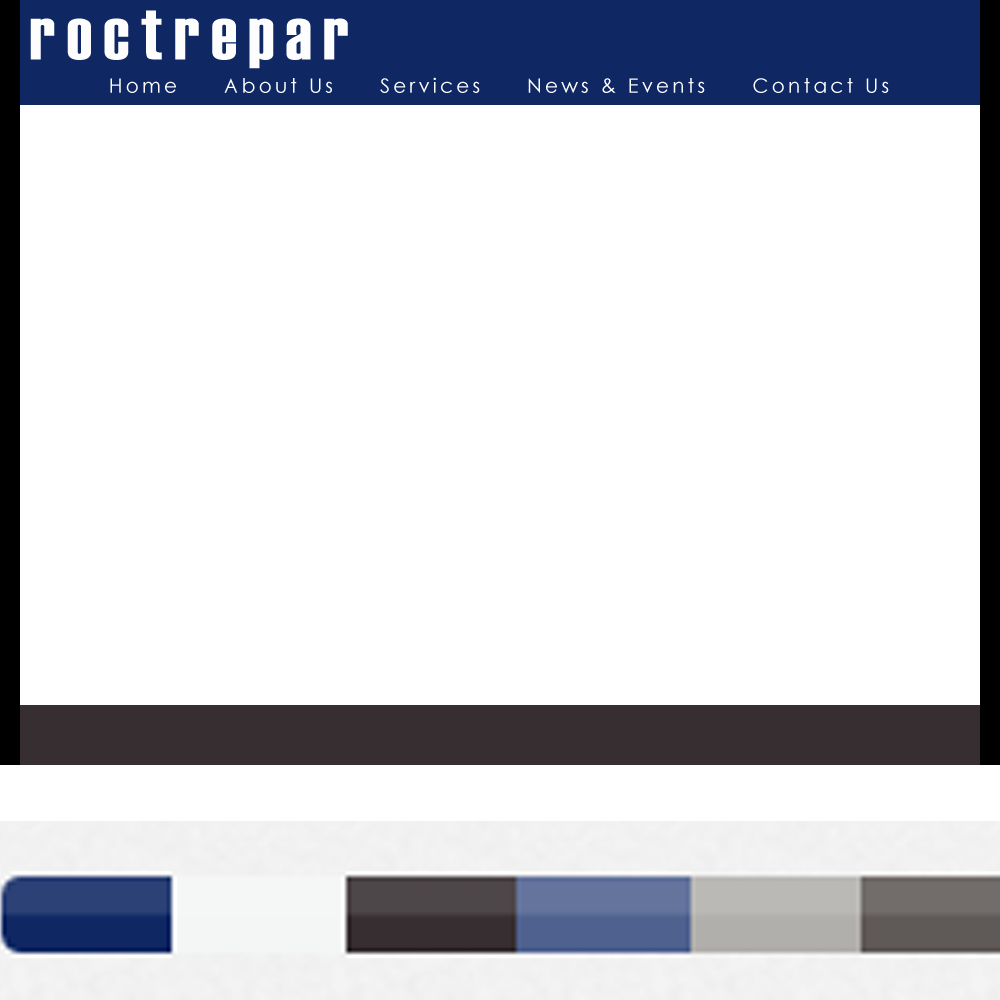
<style>
.page{position:relative;width:1000px;height:1000px;background:#ffffff}
.page>*{position:absolute;margin:0}
.t1{font:72px "Haettenschweiler";letter-spacing:0.16em;color:#fdfdfe}
.t2{font:20px "CenturyGothic";letter-spacing:0.16em;color:#fdfdfe}
</style>
<div class="page">
<p class="t1" style="left:30px;top:10px;width:318px;height:59px">roctrepar</p>
<p class="t2" style="left:110px;top:77px;width:779px;height:16px">Home     About Us     Services     News &amp; Events     Contact Us</p>
</div>
